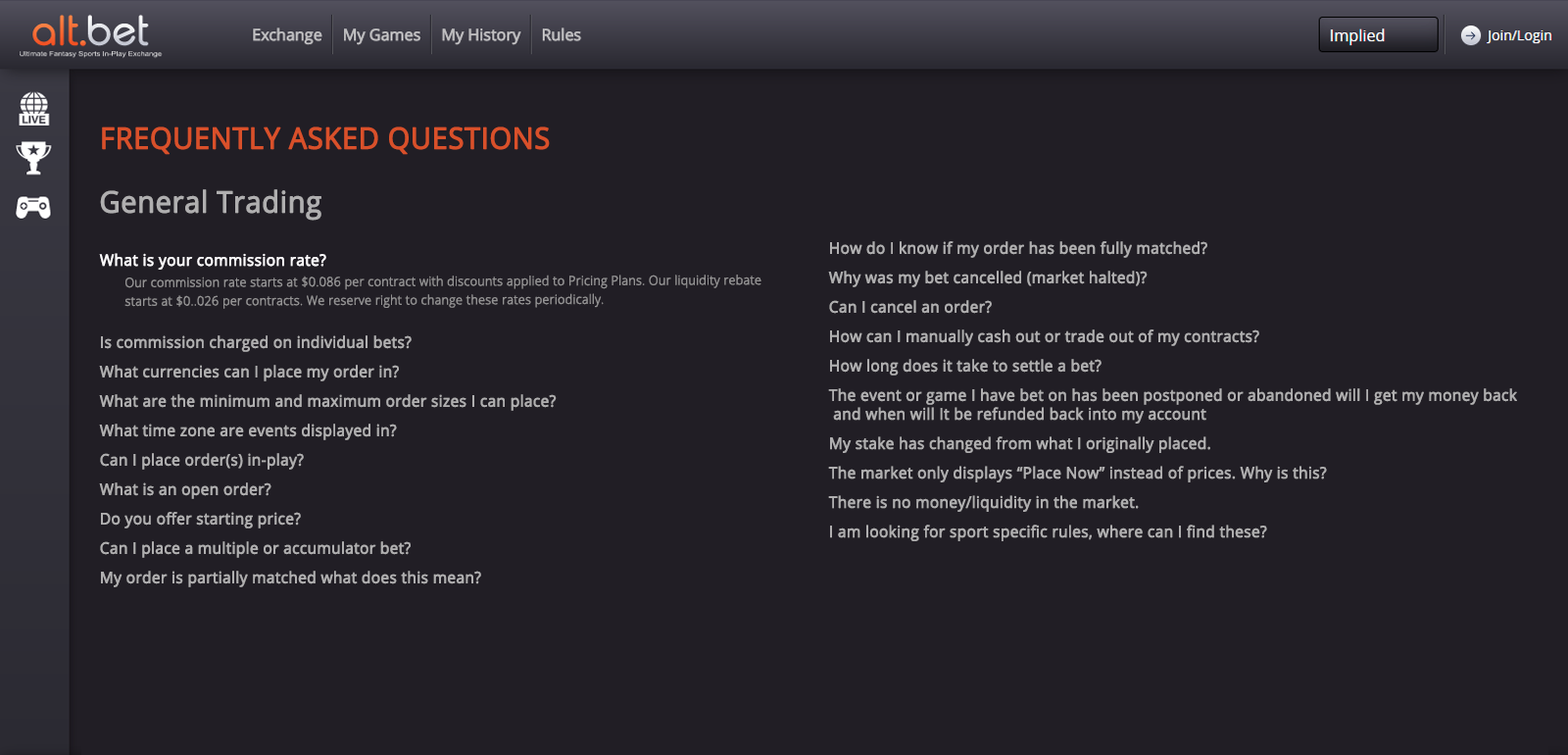
<style>
.page{position:relative;width:1568px;height:755px;background:#211e25}
.page>*{position:absolute;margin:0}
.t1{font:29.4px "OpenSans";color:#d9502a;font-weight:bold;scale:0.96 1}
.t2{font:29.4px "OpenSans";color:#b0afb0;font-weight:bold;scale:0.96 1}
.t3{font:15.7px/29.4px "OpenSans";color:#b0afb0;font-weight:bold;scale:0.96 1}
.t4{font:15.7px "OpenSans";color:#b0afb0;font-weight:bold;scale:0.96 1}
.t5{font:15.7px "OpenSans";color:#fefcff;font-weight:bold;scale:0.96 1}
.t6{font:12.7px/18.6px "OpenSans-Light";color:#939293;font-weight:bold;scale:0.96 1}
</style>
<div class="page">
<p class="t1" style="left:102px;top:126px;width:448px;height:29px">FREQUENTLY ASKED QUESTIONS</p>
<p class="t2" style="left:100px;top:189px;width:221px;height:31px">General Trading</p>
<p class="t3" style="left:828px;top:241px;width:689px;height:300px">How do I know if my order has been fully matched?<br>Why was my bet cancelled (market halted)?<br>Can I cancel an order?<br>How can I manually cash out or trade out of my contracts?<br>How long does it take to settle a bet?<br>T<span class="t4">he event or game I have bet on has been postponed or abandoned will I get my money back<br> and when will It be refunded back into my account<br></span>My stake has changed from what I originally placed.<br>The market only displays “Place Now” instead of prices. Why is this?<br>There is no money/liquidity in the market.<br>I am looking for sport specific rules, where can I find these?</p>
<p class="t5" style="left:99px;top:253px;width:227px;height:17px">What is your commission rate?</p>
<p class="t6" style="left:124px;top:274px;width:637px;height:35px">Our commission rate starts at $0.086 per contract with discounts applied to Pricing Plans. Our liquidity rebate starts at $0..026 per contracts. We reserve right to change these rates periodically.</p>
<p class="t3" style="left:99px;top:335px;width:458px;height:252px">Is commission charged on individual bets?<br>What currencies can I place my order in?<br>What are the minimum and maximum order sizes I can place?<br>What time zone are events displayed in?<br>Can I place order(s) in-play?<br>What is an open order?<br>Do you offer starting price?<br>Can I place a multiple or accumulator bet?<br>My order is partially matched what does this mean?</p>
</div>
